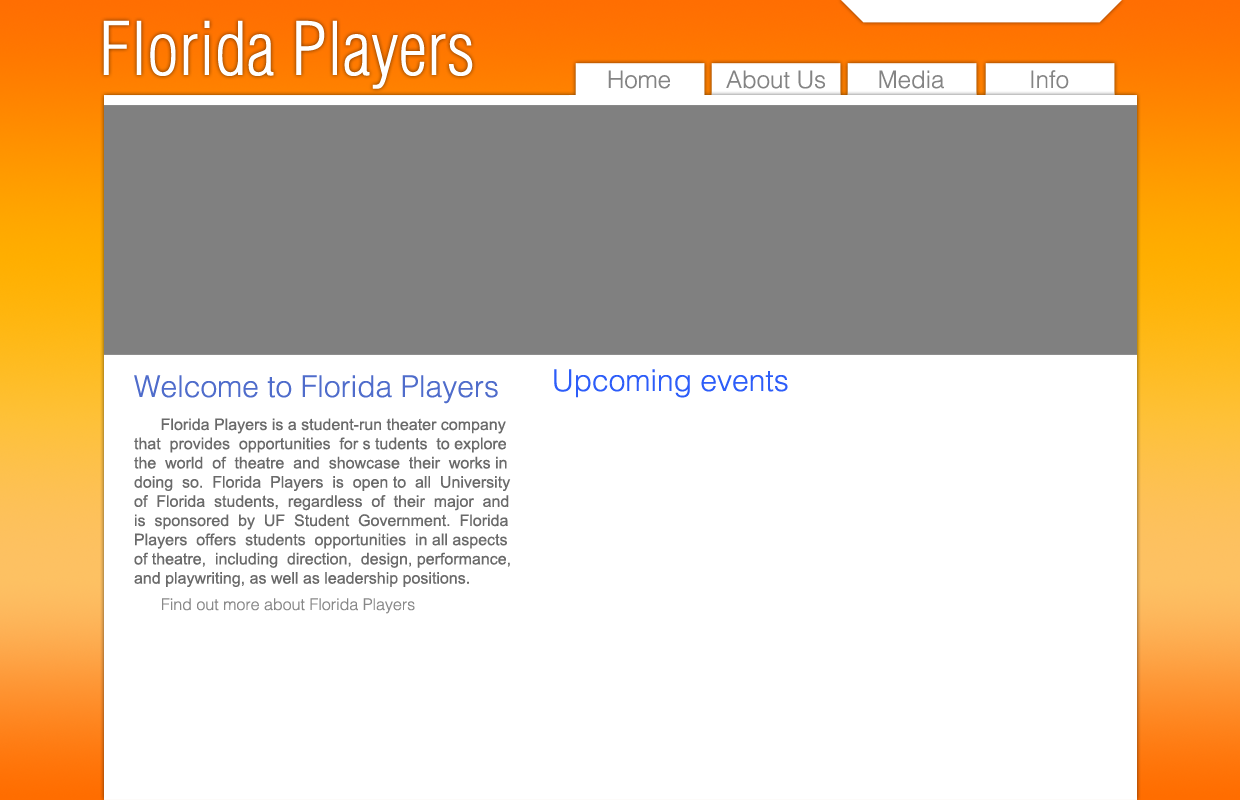
<style>
.page{position:relative;width:1240px;height:800px;background:#ffffff}
.page>*{position:absolute;margin:0}
.t1{font:72px "HelveticaLTStd-LightCond";color:#ffffff}
.t2{font:24px "HelveticaLTStd-Light";color:#848484}
.t3{font:30px "HelveticaLTStd-Light";color:#4f6ccb}
.t4{font:30px "HelveticaLTStd-Light";color:#2d5df9}
.t5{font:16px "ArialMT";color:#6a6a6a}
.t6{font:16px "HelveticaLTStd-Light";color:#888888}
</style>
<div class="page">
<p class="t1" style="left:103px;top:20px;width:370px;height:69px">Florida Players</p>
<p class="t2" style="left:608px;top:70px;width:62px;height:19px">Home</p>
<p class="t2" style="left:726px;top:70px;width:99px;height:19px">About Us</p>
<p class="t2" style="left:879px;top:70px;width:65px;height:19px">Media</p>
<p class="t2" style="left:1031px;top:70px;width:38px;height:19px">Info</p>
<p class="t3" style="left:134px;top:375px;width:364px;height:29px">Welcome to Florida Players</p>
<p class="t4" style="left:554px;top:369px;width:234px;height:29px">Upcoming events</p>
<p class="t5" style="left:134px;top:418px;width:377px;height:169px">Florida Players is a student-run theater company<br>that  provides  opportunities  for s tudents  to explore<br>the  world  of  theatre  and  showcase  their  works in<br>doing  so.  Florida  Players  is  open to  all  University<br>of  Florida  students,  regardless  of  their  major  and<br>is  sponsored  by  UF  Student  Government.  Florida<br>Players  offers  students  opportunities  in all aspects<br>of theatre,  including  direction,  design, performance,<br>and playwriting, as well as leadership positions.</p>
<p class="t6" style="left:162px;top:598px;width:253px;height:16px">Find out more about Florida Players</p>
</div>
